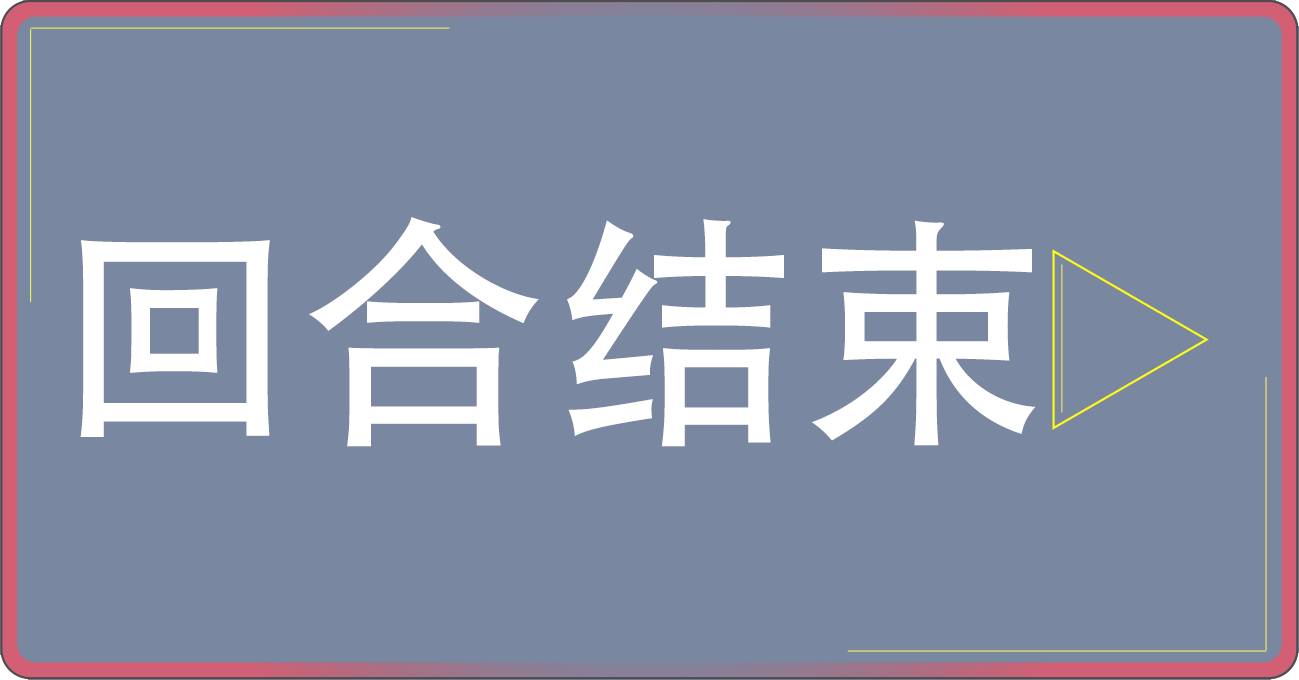
<style>
.page{position:relative;width:1299px;height:680px;background:#7987a1}
.page>*{position:absolute;margin:0}
.t1{font:250px "AdobeHeitiStd-Regular";color:#ffffff}
</style>
<div class="page">
<p class="t1" style="left:80px;top:217px;width:955px;height:230px">回合结束</p>
</div>
